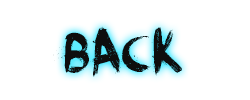
<style>
.page{position:relative;width:250px;height:100px;background:#ffffff}
.page>*{position:absolute;margin:0}
.t1{font:60px "FaceYourFears";color:#0e0e0e}
</style>
<div class="page">
<p class="t1" style="left:53px;top:26px;width:129px;height:51px">Back</p>
</div>
